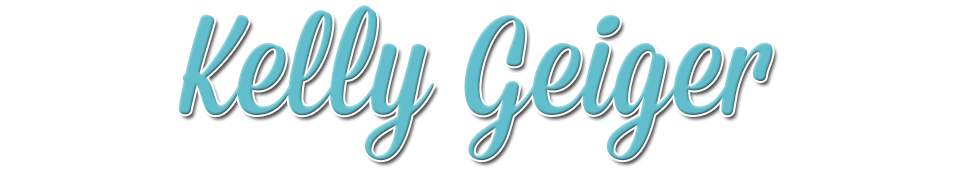
<style>
.page{position:relative;width:960px;height:170px;background:#ffffff}
.page>*{position:absolute;margin:0}
.t1{font:139.8px "Mission-Script";color:#62becc;scale:1.11 1}
</style>
<div class="page">
<p class="t1" style="left:178px;top:5px;width:595px;height:156px">Kelly Geiger</p>
</div>
